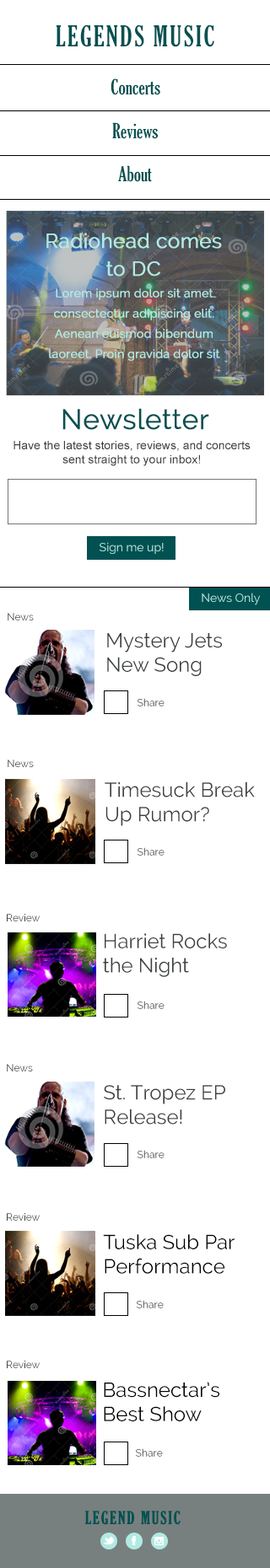
<style>
.page{position:relative;width:270px;height:1568px;background:#ffffff}
.page>*{position:absolute;margin:0}
.t1{font:27.8px "GloucesterMT-ExtraCondensed";letter-spacing:0.075em;color:#025152;text-transform:uppercase}
.t2{font:20.2px "GloucesterMT-ExtraCondensed";color:#025152}
.t3{font:20.2px/27.8px "Raleway";color:#b1eae3;font-weight:bold}
.t4{font:11.8px/20.2px "Raleway";color:#b1eae3;font-weight:bold}
.t5{font:27.8px "Raleway";color:#025152;font-weight:bold}
.t6{font:11.8px "ArialMT";color:#3b3f3e}
.t7{font:11.8px "Raleway";color:#b1eae3}
.t8{font:10.1px "Raleway"}
.t9{font:20.2px "Raleway";color:#3b3f3e}
.t10{font:10.1px "Raleway";color:#3b3f3e}
.t11{font:20.2px "Raleway";color:#000000}
.t12{font:17.1px "GloucesterMT-ExtraCondensed";letter-spacing:0.075em;color:#025152;text-transform:uppercase;font-weight:bold}
</style>
<div class="page">
<p class="t1" style="left:56px;top:24px;width:158px;height:23px">Legends Music</p>
<p class="t2" style="left:110px;top:78px;width:50px;height:17px">Concerts</p>
<p class="t2" style="left:112px;top:122px;width:46px;height:17px">Reviews</p>
<p class="t2" style="left:118px;top:165px;width:34px;height:17px">About</p>
<p class="t3" style="left:46px;top:233px;width:176px;height:44px;text-align:center">Radiohead comes<br>to DC</p>
<p class="t4" style="left:49px;top:288px;width:171px;height:73px;text-align:center">Lorem ipsum dolor sit amet consectectur adipiscing elit. Aenean euismod bibendum laoreet. Proin gravida dolor sit amet lacus.</p>
<p class="t5" style="left:62px;top:408px;width:147px;height:22px">Newsletter</p>
<p class="t6" style="left:13px;top:441px;width:237px;height:25px;text-align:center">Have the latest stories, reviews, and concerts sent straight to your inbox!</p>
<p class="t7" style="left:99px;top:542px;width:65px;height:12px">Sign me up!</p>
<p class="t7" style="left:201px;top:593px;width:59px;height:12px">News Only</p>
<p class="t8" style="left:8px;top:613px;width:26px;height:7px">News</p>
<p class="t9" style="left:107px;top:633px;width:115px;height:43px">Mystery Jets<br>New Song</p>
<p class="t8" style="left:137px;top:698px;width:27px;height:8px">Share</p>
<p class="t8" style="left:8px;top:760px;width:26px;height:7px">News</p>
<p class="t9" style="left:105px;top:781px;width:150px;height:45px">Timesuck Break<br>Up Rumor?</p>
<p class="t8" style="left:137px;top:847px;width:27px;height:9px">Share</p>
<p class="t10" style="left:7px;top:914px;width:33px;height:7px">Review</p>
<p class="t9" style="left:103px;top:933px;width:124px;height:44px">Harriet Rocks<br>the Night</p>
<p class="t8" style="left:137px;top:1001px;width:27px;height:8px">Share</p>
<p class="t8" style="left:7px;top:1064px;width:26px;height:7px">News</p>
<p class="t9" style="left:104px;top:1085px;width:121px;height:40px">St. Tropez EP<br>Release!</p>
<p class="t8" style="left:137px;top:1150px;width:27px;height:8px">Share</p>
<p class="t10" style="left:7px;top:1213px;width:33px;height:8px">Review</p>
<p class="t11" style="left:103px;top:1234px;width:131px;height:40px">Tuska Sub Par<br>Performance</p>
<p class="t8" style="left:137px;top:1300px;width:27px;height:8px">Share</p>
<p class="t10" style="left:7px;top:1361px;width:33px;height:7px">Review</p>
<p class="t11" style="left:104px;top:1382px;width:115px;height:39px">Bassnectar’s<br>Best Show</p>
<p class="t8" style="left:136px;top:1448px;width:27px;height:9px">Share</p>
<p class="t12" style="left:85px;top:1511px;width:95px;height:14px">Legend Music</p>
</div>
